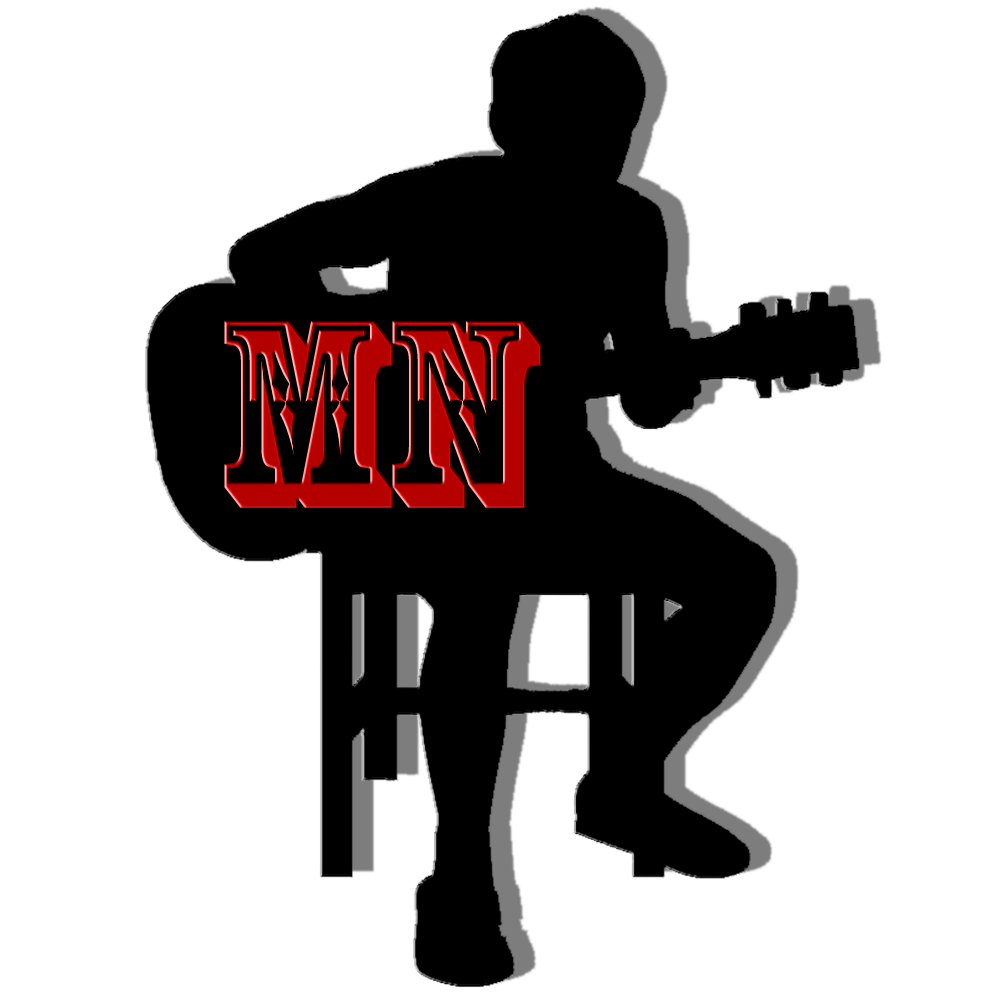
<style>
.page{position:relative;width:1000px;height:1000px;background:#ffffff}
.page>*{position:absolute;margin:0}
.t1{font:250px "RosewoodStd-Regular"}
</style>
<div class="page">
<p class="t1" style="left:224px;top:321px;width:318px;height:187px">MN</p>
</div>
